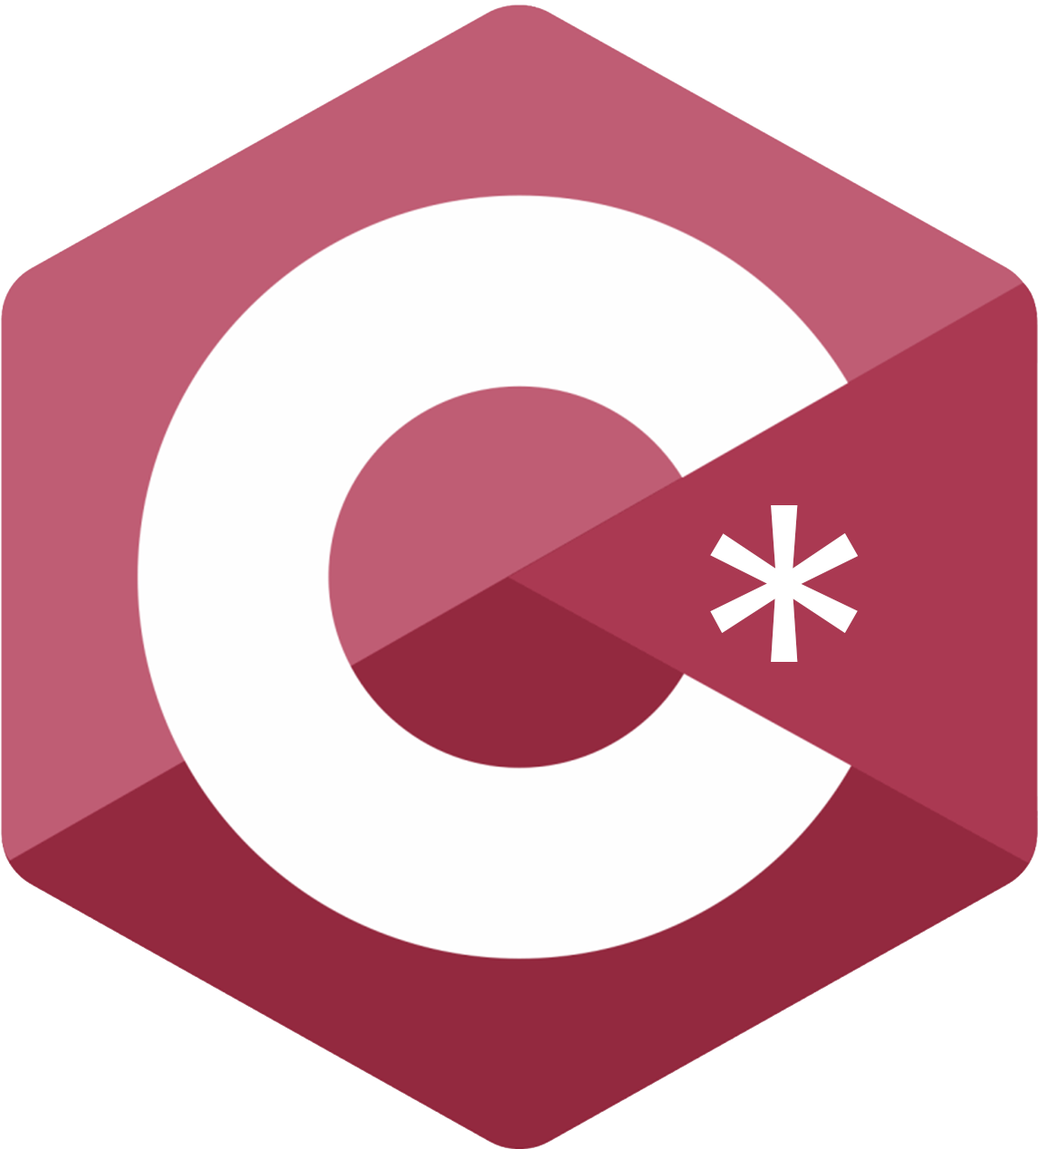
<style>
.page{position:relative;width:1038px;height:1149px;background:#ffffff}
.page>*{position:absolute;margin:0}
.t1{font:377.3px "Consolas";color:#ffffff}
</style>
<div class="page">
<p class="t1" style="left:710px;top:505px;width:148px;height:157px">*</p>
</div>
